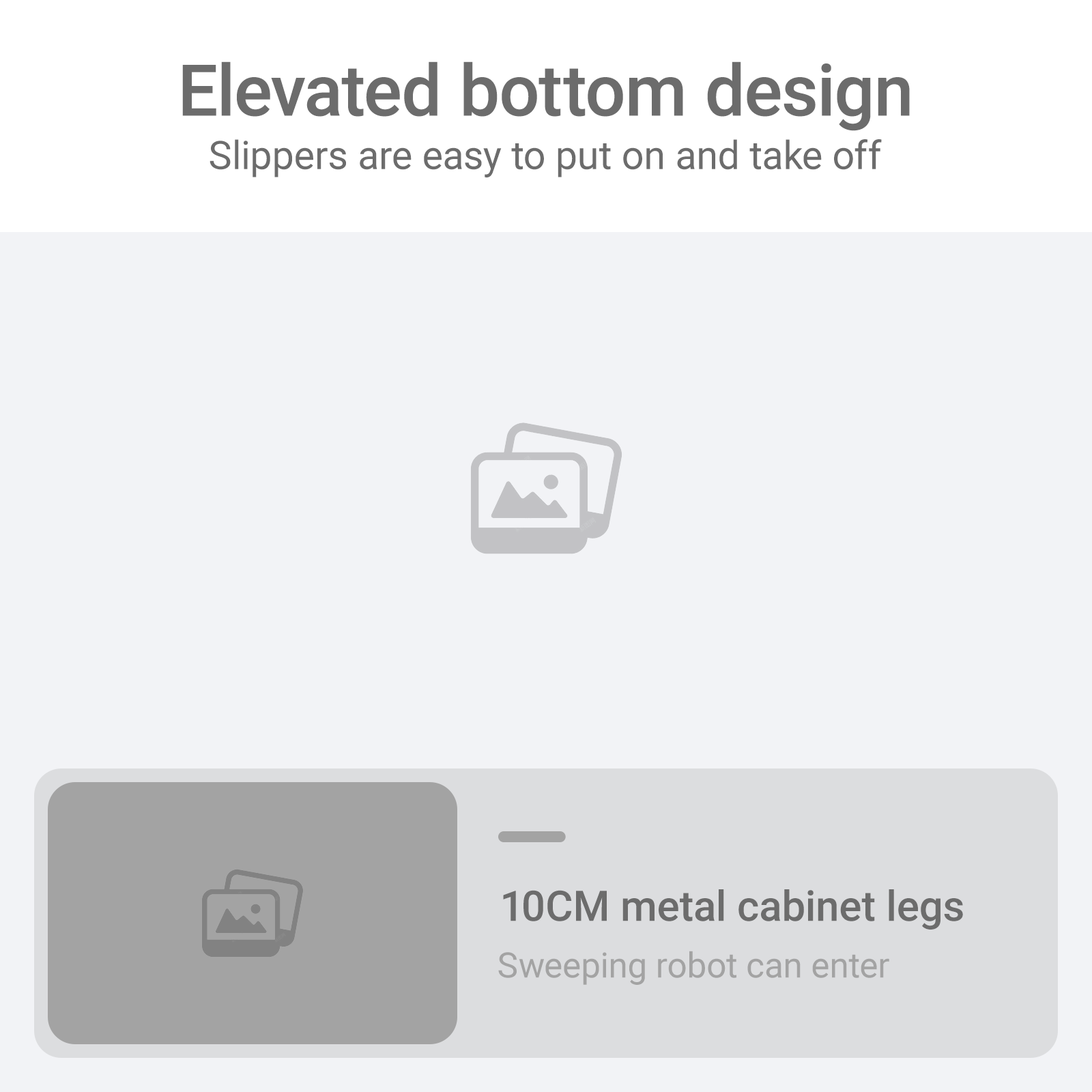
<style>
.page{position:relative;width:1092px;height:1092px;background:#f2f3f6}
.page>*{position:absolute;margin:0}
.t1{font:71.3px "Roboto-Medium";color:#6c6c6c}
.t2{font:39.3px "Roboto-Regular";color:#6c6c6c}
.t3{font:42.2px "Roboto-Medium";color:#6c6c6c}
.t4{font:34.9px "Roboto-Regular";color:#a3a3a3}
</style>
<div class="page">
<p class="t1" style="left:182px;top:61px;width:728px;height:70px">Elevated bottom design</p>
<p class="t2" style="left:210px;top:139px;width:672px;height:38px">Slippers are easy to put on and take off</p>
<p class="t3" style="left:503px;top:889px;width:460px;height:41px">10CM metal cabinet legs</p>
<p class="t4" style="left:498px;top:951px;width:391px;height:34px">Sweeping robot can enter</p>
</div>
